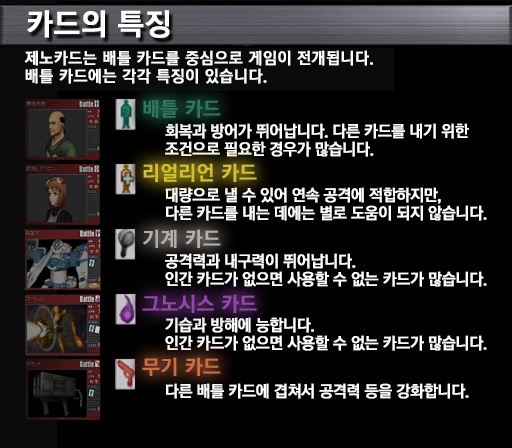
<style>
.page{position:relative;width:512px;height:448px;background:#000000}
.page>*{position:absolute;margin:0}
.t1{font:30px "KoreanGD15-R";color:#ffffff;font-weight:bold}
.t2{font:16px/18px "KoreanGD15-R";color:#ffffff;font-weight:bold}
.t3{font:20px "KoreanGD15-R";color:#2c775c;font-weight:bold}
.t4{font:16px/18px "KoreanGD15-R";letter-spacing:-0.05em;color:#ffffff;font-weight:bold}
.t5{font:20px "KoreanGD15-R";color:#d2bf2b;font-weight:bold}
.t6{font:20px "KoreanGD15-R";color:#b5ada8;font-weight:bold}
.t7{font:20px "KoreanGD15-R";color:#9247aa;font-weight:bold}
.t8{font:20px "KoreanGD15-R";color:#cc6d44;font-weight:bold}
.t9{font:16px "KoreanGD15-R";letter-spacing:-0.05em;color:#ffffff;font-weight:bold}
</style>
<div class="page">
<p class="t1" style="left:27px;top:10px;width:143px;height:28px">카드의 특징</p>
<p class="t2" style="left:24px;top:50px;width:349px;height:34px">제노카드는 배틀 카드를 중심으로 게임이 전개됩니다.<br>배틀 카드에는 각각 특징이 있습니다.</p>
<p class="t3" style="left:143px;top:99px;width:78px;height:19px">배틀 카드</p>
<p class="t4" style="left:165px;top:123px;width:304px;height:34px">회복과 방어가 뛰어납니다. 다른 카드를 내기 위한<br>조건으로 필요한 경우가 많습니다.</p>
<p class="t5" style="left:143px;top:163px;width:114px;height:19px">리얼리언 카드</p>
<p class="t4" style="left:165px;top:187px;width:322px;height:34px">대량으로 낼 수 있어 연속 공격에 적합하지만,<br>다른 카드를 내는 데에는 별로 도움이 되지 않습니다.</p>
<p class="t6" style="left:143px;top:229px;width:78px;height:19px">기계 카드</p>
<p class="t4" style="left:165px;top:253px;width:322px;height:34px">공격력과 내구력이 뛰어납니다.<br>인간 카드가 없으면 사용할 수 없는 카드가 많습니다.</p>
<p class="t7" style="left:142px;top:294px;width:115px;height:19px">그노시스 카드</p>
<p class="t4" style="left:165px;top:317px;width:322px;height:34px">기습과 방해에 능합니다.<br>인간 카드가 없으면 사용할 수 없는 카드가 많습니다.</p>
<p class="t8" style="left:142px;top:357px;width:79px;height:19px">무기 카드</p>
<p class="t9" style="left:165px;top:383px;width:304px;height:16px">다른 배틀 카드에 겹쳐서 공격력 등을 강화합니다.</p>
</div>
